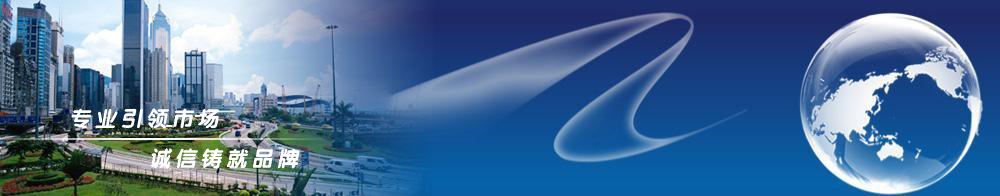
<style>
.page{position:relative;width:1000px;height:196px}
.page>*{position:absolute;margin:0}
.t1{font:21.3px "FZY4JW--GB1-0";letter-spacing:0.2em;color:#ffffff;font-style:italic}
</style>
<div class="page">
<p class="t1" style="left:71px;top:108px;width:149px;height:21px">专业引领市场</p>
<p class="t1" style="left:151px;top:148px;width:149px;height:21px">诚信铸就品牌</p>
</div>
